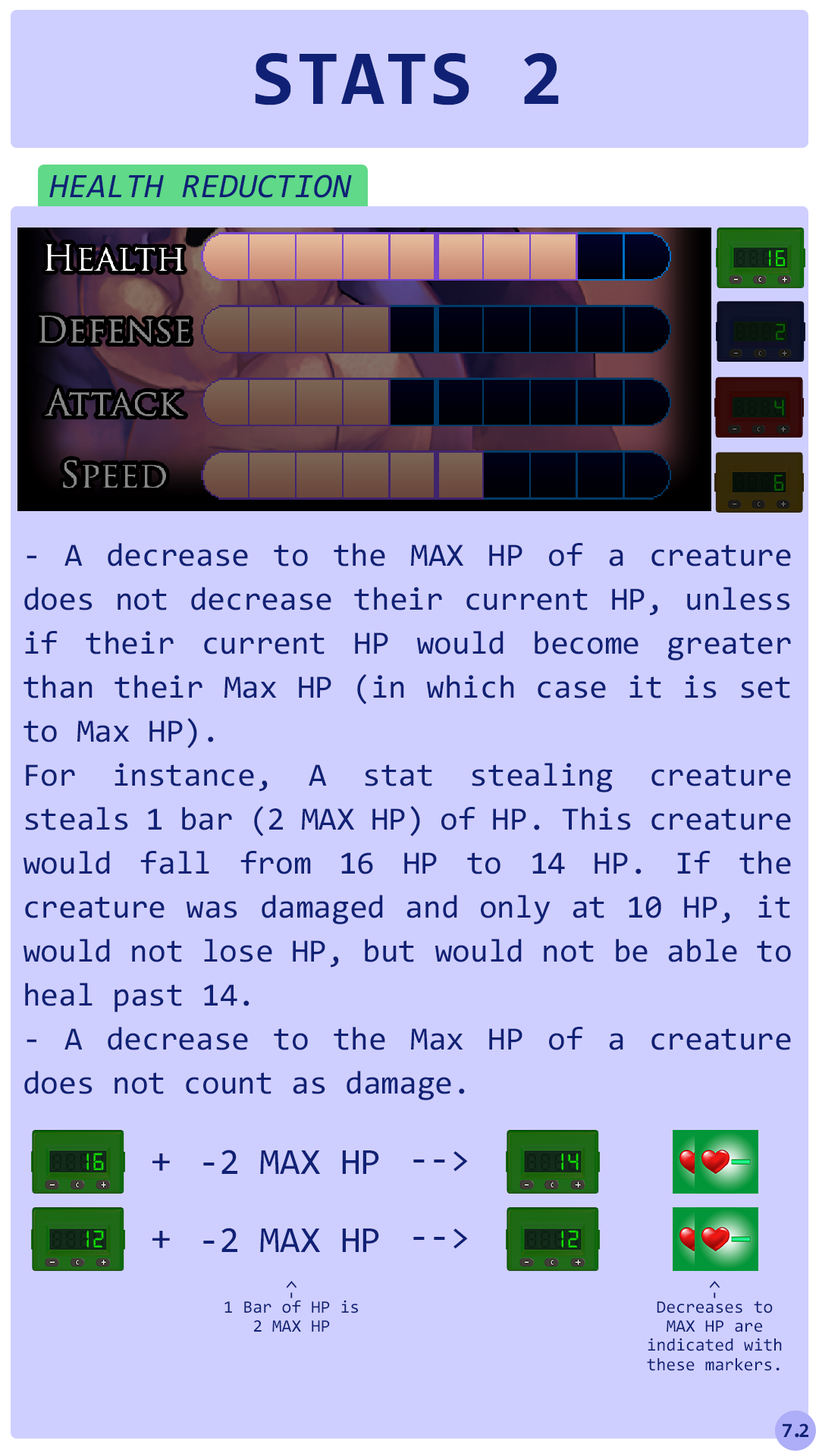
<style>
.page{position:relative;width:819px;height:1456px;background:#cfcfff}
.page>*{position:absolute;margin:0}
.t1{font:78.3px "Consolas-Bold";letter-spacing:0.02em;color:#102175}
.t2{font:34.3px "Consolas-Italic";color:#102175}
.t3{font:24.4px "Digital-7";letter-spacing:0.12em;color:#12dc01}
.t4{font:24.4px "Digital-7";letter-spacing:0.12em;color:#086100}
.t5{font:32.6px/44px "Consolas";color:#102175}
.t6{font:25.7px "Digital-7";letter-spacing:0.12em;color:#12dc01}
.t7{font:36.7px "Consolas";color:#102175}
.t8{font:19.1px "Consolas";color:#102175}
.t9{font:17.7px/19.2px "Consolas";color:#102175}
.t10{font:20.5px "Consolas-Bold";letter-spacing:-0.06em;color:#102175}
.t11{font:20.5px "Consolas-Bold";letter-spacing:-0.22em;color:#102175}
</style>
<div class="page">
<p class="t1" style="left:255px;top:53px;width:304px;height:52px">STATS 2</p>
<p class="t2" style="left:49px;top:174px;width:303px;height:24px">HEALTH REDUCTION</p>
<p class="t3" style="left:769px;top:250px;width:16px;height:16px">16</p>
<p class="t4" style="left:776px;top:324px;width:9px;height:16px">2</p>
<p class="t4" style="left:774px;top:400px;width:10px;height:16px">4</p>
<p class="t4" style="left:774px;top:475px;width:9px;height:16px">6</p>
<p class="t5" style="left:24px;top:543px;width:767px;height:557px;text-align:justify">- A decrease to the MAX HP of a creature does not decrease their current HP, unless if their current HP would become greater than their Max HP (in which case it is set to Max HP).<br>For instance, A stat stealing creature steals 1 bar (2 MAX HP) of HP. This creature would fall from 16 HP to 14 HP. If the creature was damaged and only at 10 HP, it would not lose HP, but would not be able to heal past 14.<br>- A decrease to the Max HP of a creature does not count as damage.</p>
<p class="t6" style="left:86px;top:1153px;width:18px;height:17px">16</p>
<p class="t7" style="left:152px;top:1153px;width:18px;height:18px">+</p>
<p class="t7" style="left:203px;top:1150px;width:176px;height:24px">-2 MAX HP</p>
<p class="t7" style="left:413px;top:1151px;width:55px;height:21px">--&gt;</p>
<p class="t6" style="left:561px;top:1153px;width:18px;height:17px">14</p>
<p class="t7" style="left:203px;top:1228px;width:176px;height:24px">-2 MAX HP</p>
<p class="t7" style="left:413px;top:1228px;width:55px;height:21px">--&gt;</p>
<p class="t6" style="left:86px;top:1230px;width:18px;height:17px">12</p>
<p class="t7" style="left:152px;top:1231px;width:18px;height:17px">+</p>
<p class="t6" style="left:561px;top:1230px;width:18px;height:17px">12</p>
<p class="t8" style="left:286px;top:1281px;width:11px;height:17px;rotate:-90deg">-&gt;</p>
<p class="t8" style="left:709px;top:1281px;width:11px;height:17px;rotate:-90deg">-&gt;</p>
<p class="t9" style="left:224px;top:1300px;width:134px;height:32px;text-align:center">1 Bar of HP is 2 MAX HP</p>
<p class="t9" style="left:647px;top:1301px;width:135px;height:70px;text-align:center">Decreases to MAX HP are indicated with these markers.</p>
<p class="t10" style="left:783px;top:1423px;width:25px;height:15px">7<span class="t11">.</span>2</p>
</div>
